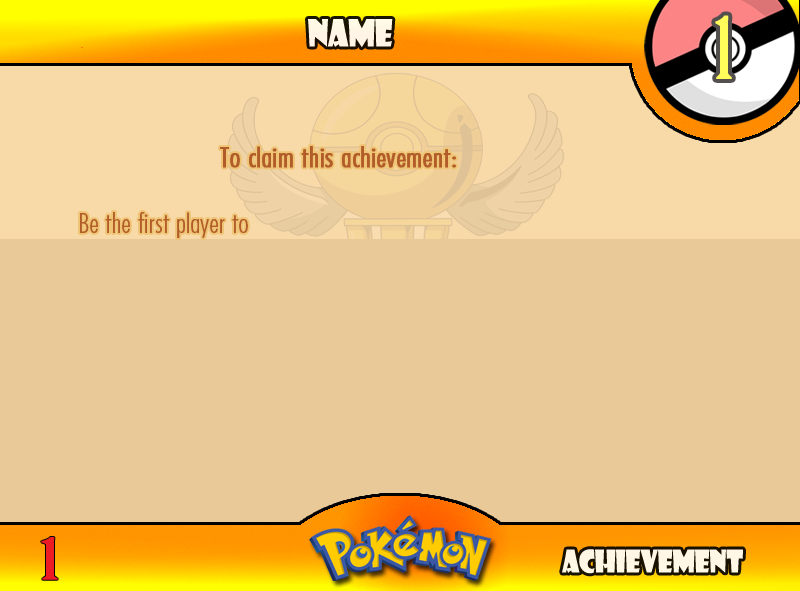
<style>
.page{position:relative;width:800px;height:591px;background:#e9c997}
.page>*{position:absolute;margin:0}
.t1{font:83.3px "BirchStd";letter-spacing:0.025em;color:#fffd59;font-weight:bold}
.t2{font:36.7px "ShowcardGothic-Reg";letter-spacing:-0.025em;color:#fff5e6;scale:0.91 1}
.t3{font:27.8px "FuturaCondensedBQ-Light";color:#b15c29;font-weight:bold;scale:1.08 1}
.t4{font:33.3px "FuturaCondensedBQ-Light";color:#b15c29;font-weight:bold;scale:1.08 1}
.t5{font:27.8px "FuturaCondensedBQ-Light";color:#b15c29;scale:1.08 1}
.t6{font:55.6px "BirchStd";color:#ed1c24;font-weight:bold;scale:1.5 1}
.t7{font:30.6px "ShowcardGothic-Reg";letter-spacing:-0.025em;color:#fff7e6;scale:0.91 1}
</style>
<div class="page">
<p class="t1" style="left:715px;top:15px;width:17px;height:64px">1</p>
<p class="t2" style="left:308px;top:19px;width:85px;height:29px">name</p>
<p class="t3" style="left:80px;top:146px;width:376px;height:92px"><span class="t4">          <br>      </span>To claim this achievement:<br><br> <span class="t5">Be the first player to</span></p>
<p class="t6" style="left:41px;top:537px;width:17px;height:43px">1</p>
<p class="t7" style="left:562px;top:549px;width:181px;height:25px">Achievement</p>
</div>
